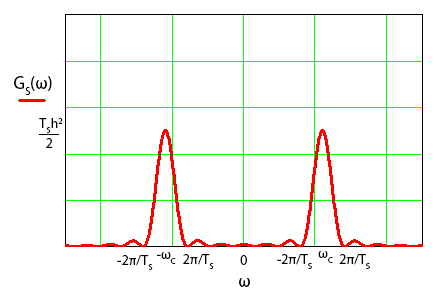
<style>
.page{position:relative;width:440px;height:290px;background:#ffffff}
.page>*{position:absolute;margin:0}
.t1{font:18px "MyriadPro-Regular";color:#000000}
.t2{font:14px "MyriadPro-Regular";color:#000000}
</style>
<div class="page">
<p class="t1" style="left:14px;top:76px;width:38px;height:19px">GS(ω)</p>
<p class="t2" style="left:39px;top:118px;width:24px;height:15px">TSh2</p>
<p class="t2" style="left:46px;top:138px;width:7px;height:10px">2</p>
<p class="t2" style="left:117px;top:255px;width:36px;height:15px">-2π/TS</p>
<p class="t2" style="left:157px;top:252px;width:19px;height:12px">-ωC</p>
<p class="t2" style="left:183px;top:254px;width:31px;height:15px">2π/TS</p>
<p class="t2" style="left:240px;top:255px;width:7px;height:10px">0</p>
<p class="t2" style="left:277px;top:254px;width:35px;height:15px">-2π/TS</p>
<p class="t2" style="left:318px;top:251px;width:15px;height:12px">ωC</p>
<p class="t2" style="left:339px;top:254px;width:31px;height:15px">2π/TS</p>
<p class="t1" style="left:239px;top:278px;width:11px;height:9px">ω</p>
</div>
